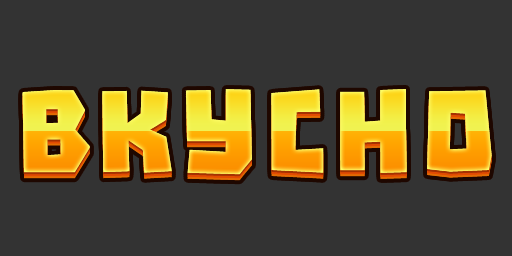
<style>
.page{position:relative;width:512px;height:256px;background:#333333}
.page>*{position:absolute;margin:0}
.t1{font:130.7px "Troika";letter-spacing:0.06em}
</style>
<div class="page">
<p class="t1" style="left:22px;top:89px;width:470px;height:86px">Вкусно</p>
</div>
